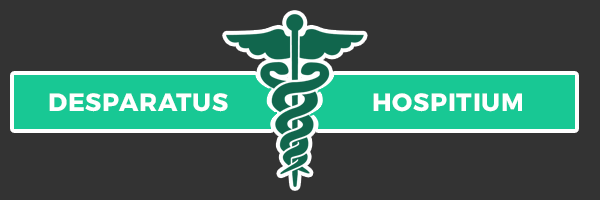
<style>
.page{position:relative;width:600px;height:200px;background:#333333}
.page>*{position:absolute;margin:0}
.t1{font:25px "Montserrat-Bold";letter-spacing:0.03em;color:#ffffff}
</style>
<div class="page">
<p class="t1" style="left:49px;top:93px;width:179px;height:19px">DESPARATUS</p>
<p class="t1" style="left:373px;top:93px;width:149px;height:19px">HOSPITIUM</p>
</div>
